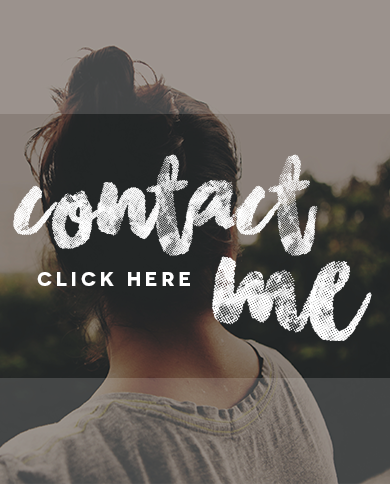
<style>
.page{position:relative;width:390px;height:484px}
.page>*{position:absolute;margin:0}
.t1{font:142.9px "ChasingEmbers";color:#ffffff}
.t2{font:198.6px "ChasingEmbers";color:#ffffff}
.t3{font:20px "Novecentosanswide-Bold";letter-spacing:0.2em;color:#ffffff}
</style>
<div class="page">
<p class="t1" style="left:13px;top:154px;width:305px;height:102px">contact</p>
<p class="t2" style="left:212px;top:256px;width:160px;height:85px">me</p>
<p class="t3" style="left:37px;top:272px;width:153px;height:14px">CLICK HERE</p>
</div>
